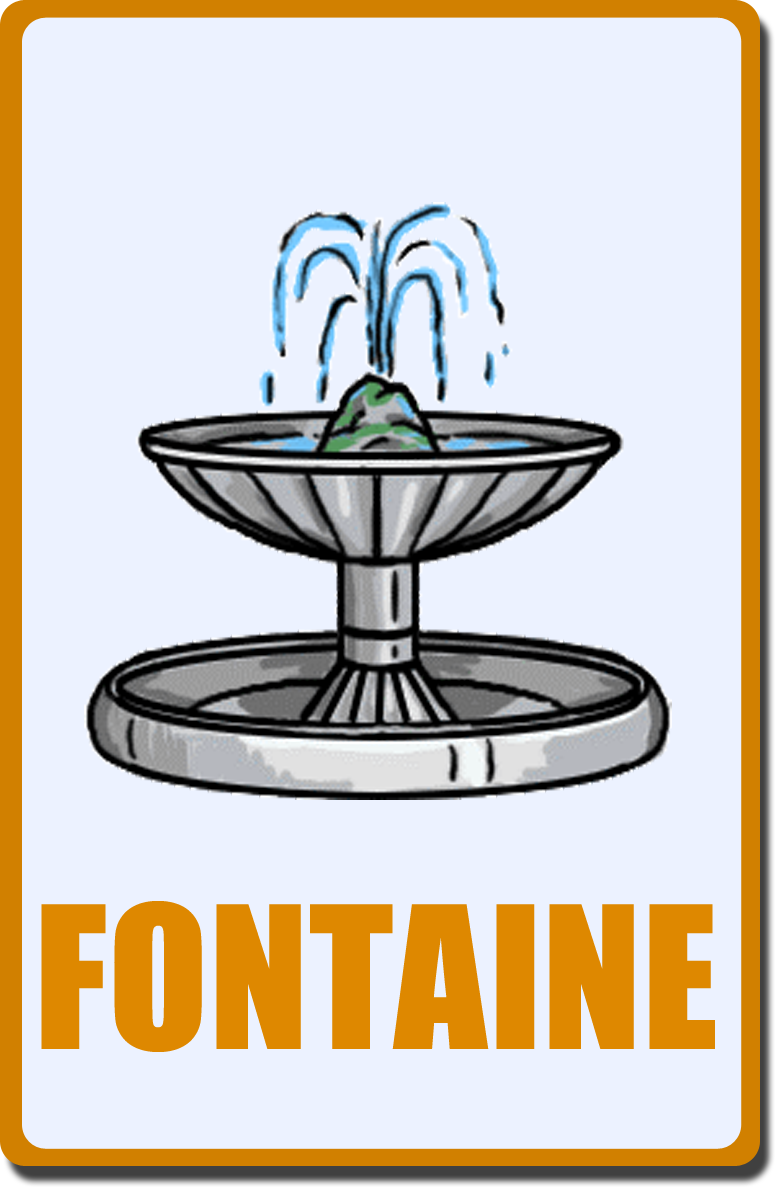
<style>
.page{position:relative;width:775px;height:1187px;background:#ecf2ff}
.page>*{position:absolute;margin:0}
.t1{font:183.3px "Impact";letter-spacing:0.005em;color:#de8800}
</style>
<div class="page">
<p class="t1" style="left:41px;top:901px;width:674px;height:151px">FONTAINE</p>
</div>
